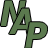
<style>
.page{position:relative;width:48px;height:48px;background:#ffffff}
.page>*{position:absolute;margin:0}
.t1{font:35px "DejaVuSansCondensed-BoldOblique";color:#5b794e}
</style>
<div class="page">
<p class="t1" style="left:0px;top:0px;width:26px;height:26px">N</p>
<p class="t1" style="left:9px;top:8px;width:24px;height:26px">A</p>
<p class="t1" style="left:25px;top:22px;width:23px;height:26px">P</p>
</div>
